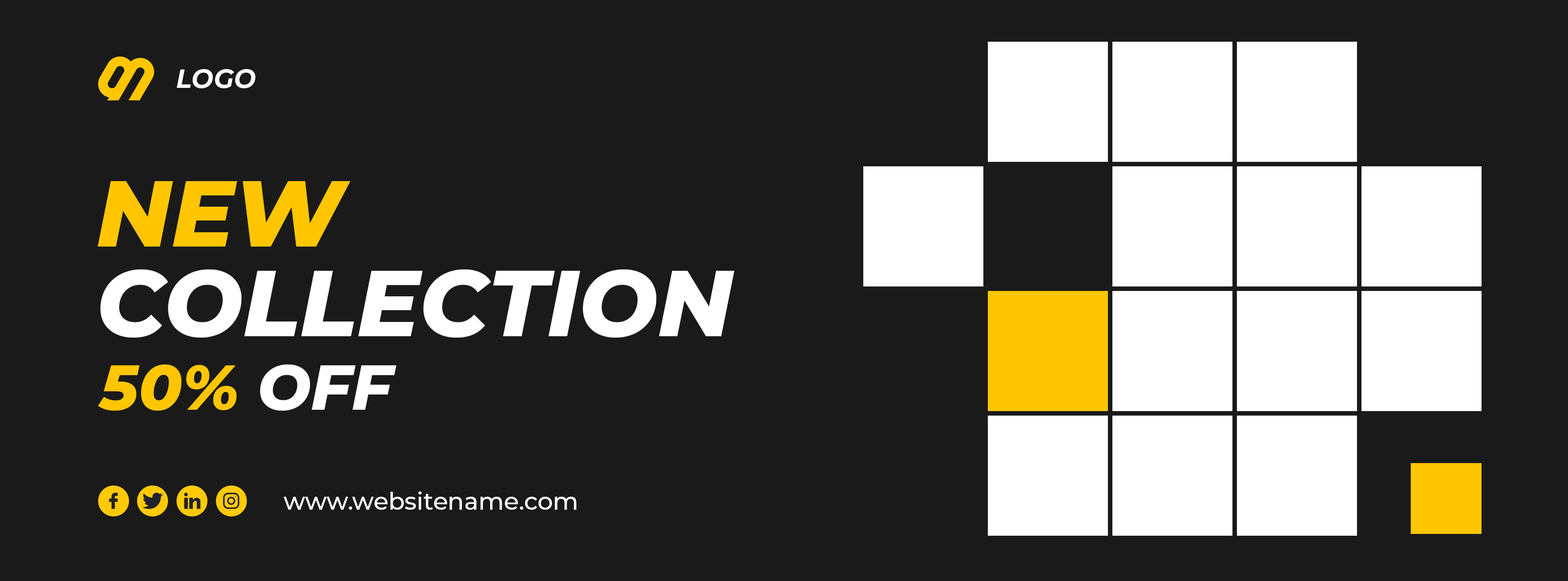
<style>
.page{position:relative;width:1568px;height:581px;background:#1a1a1a}
.page>*{position:absolute;margin:0}
.t1{font:93.3px/89.6px "Montserrat-ExtraBoldItalic";color:#ffffff;text-transform:uppercase}
.t2{font:93.3px/89.6px "Montserrat-ExtraBoldItalic";color:#ffc600;text-transform:uppercase}
.t3{font:63.5px "Montserrat-ExtraBoldItalic";color:#ffc600;text-transform:uppercase}
.t4{font:63.5px "Montserrat-ExtraBoldItalic";color:#ffffff;text-transform:uppercase}
.t5{font:24.1px "Montserrat-Medium";color:#ffffff}
</style>
<div class="page">
<p class="t1" style="left:98px;top:181px;width:636px;height:157px"><span class="t2">new<br></span>collection</p>
<p class="t3" style="left:98px;top:364px;width:298px;height:47px">50% <span class="t4">off</span></p>
<p class="t5" style="left:284px;top:491px;width:293px;height:18px">www.websitename.com</p>
</div>
